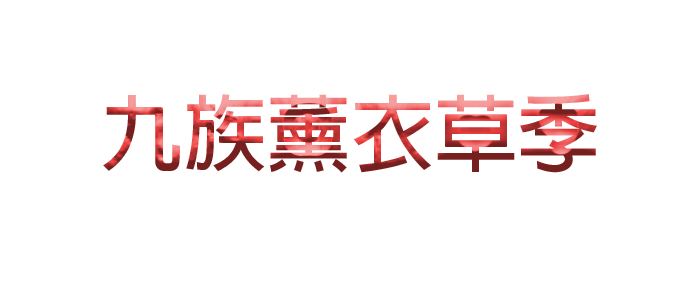
<style>
.page{position:relative;width:700px;height:300px;background:#ffffff}
.page>*{position:absolute;margin:0}
.t1{font:83.3px "AdobeFanHeitiStd-Bold"}
</style>
<div class="page">
<p class="t1" style="left:103px;top:94px;width:494px;height:79px">九族薰衣草季</p>
</div>
